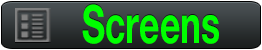
<style>
.page{position:relative;width:262px;height:50px}
.page>*{position:absolute;margin:0}
.t1{font:52.6px "HelveticaNeue-Bold";color:#00ff00;scale:0.68 1}
</style>
<div class="page">
<p class="t1" style="left:82px;top:4px;width:137px;height:40px">Screens</p>
</div>
